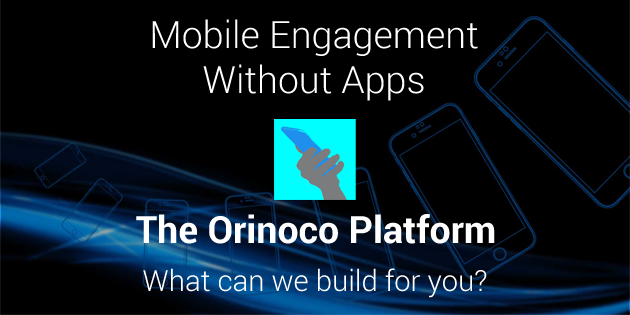
<style>
.page{position:relative;width:630px;height:315px;background:#000000}
.page>*{position:absolute;margin:0}
.t1{font:37.5px "Roboto-Light";color:#ffffff}
.t2{font:37.5px "Roboto-Bold";color:#ffffff}
.t3{font:29.2px "Roboto-Light";color:#ffffff}
</style>
<div class="page">
<p class="t1" style="left:152px;top:19px;width:326px;height:82px;text-align:center">Mobile Engagement<br>Without Apps</p>
<p class="t2" style="left:136px;top:214px;width:359px;height:30px">The Orinoco Platform</p>
<p class="t3" style="left:143px;top:268px;width:344px;height:30px">What can we build for you?</p>
</div>
